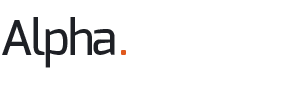
<style>
.page{position:relative;width:300px;height:85px;background:#ffffff}
.page>*{position:absolute;margin:0}
.t1{font:48px "Exo-Medium";letter-spacing:-0.04em;color:#1e2025}
.t2{font:48px "Exo-Regular";letter-spacing:-0.04em;color:#e0591e}
</style>
<div class="page">
<p class="t1" style="left:2px;top:17px;width:113px;height:51px">Alpha</p>
<p class="t2" style="left:121px;top:50px;width:5px;height:5px">.</p>
</div>
